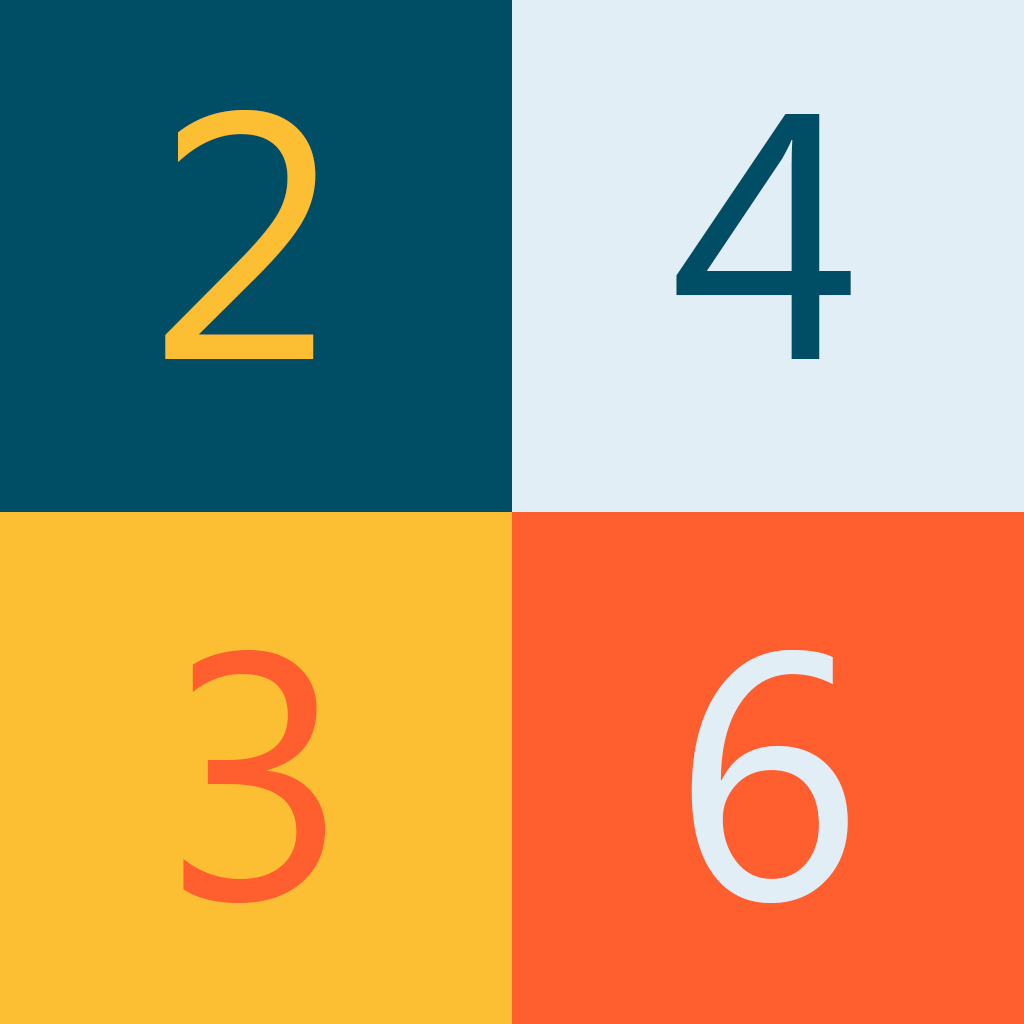
<style>
.page{position:relative;width:1024px;height:1024px;background:#004e66}
.page>*{position:absolute;margin:0}
.t1{font:350px "MicrosoftNewTaiLue";color:#fcbe32}
.t2{font:350px "MicrosoftNewTaiLue";color:#004e66}
.t3{font:350px "MicrosoftNewTaiLue";color:#ff5f2e}
.t4{font:350px "MicrosoftNewTaiLue";color:#e1eef6}
</style>
<div class="page">
<p class="t1" style="left:165px;top:110px;width:151px;height:249px">2</p>
<p class="t2" style="left:676px;top:114px;width:175px;height:245px">4</p>
<p class="t3" style="left:183px;top:650px;width:143px;height:253px">3</p>
<p class="t4" style="left:691px;top:650px;width:157px;height:253px">6</p>
</div>
